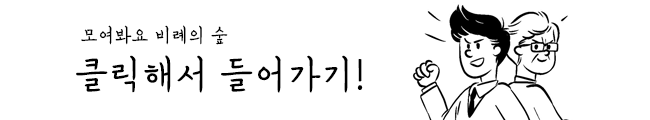
<style>
.page{position:relative;width:650px;height:120px;background:#ffffff}
.page>*{position:absolute;margin:0}
.t1{font:19.6px "KoreanEMPJ-B";color:#000000}
.t2{font:38.6px "KoreanEMPJ-B";color:#000000}
</style>
<div class="page">
<p class="t1" style="left:81px;top:25px;width:147px;height:20px">모여봐요 비례의 숲</p>
<p class="t2" style="left:76px;top:55px;width:287px;height:38px">클릭해서 들어가기!</p>
</div>
